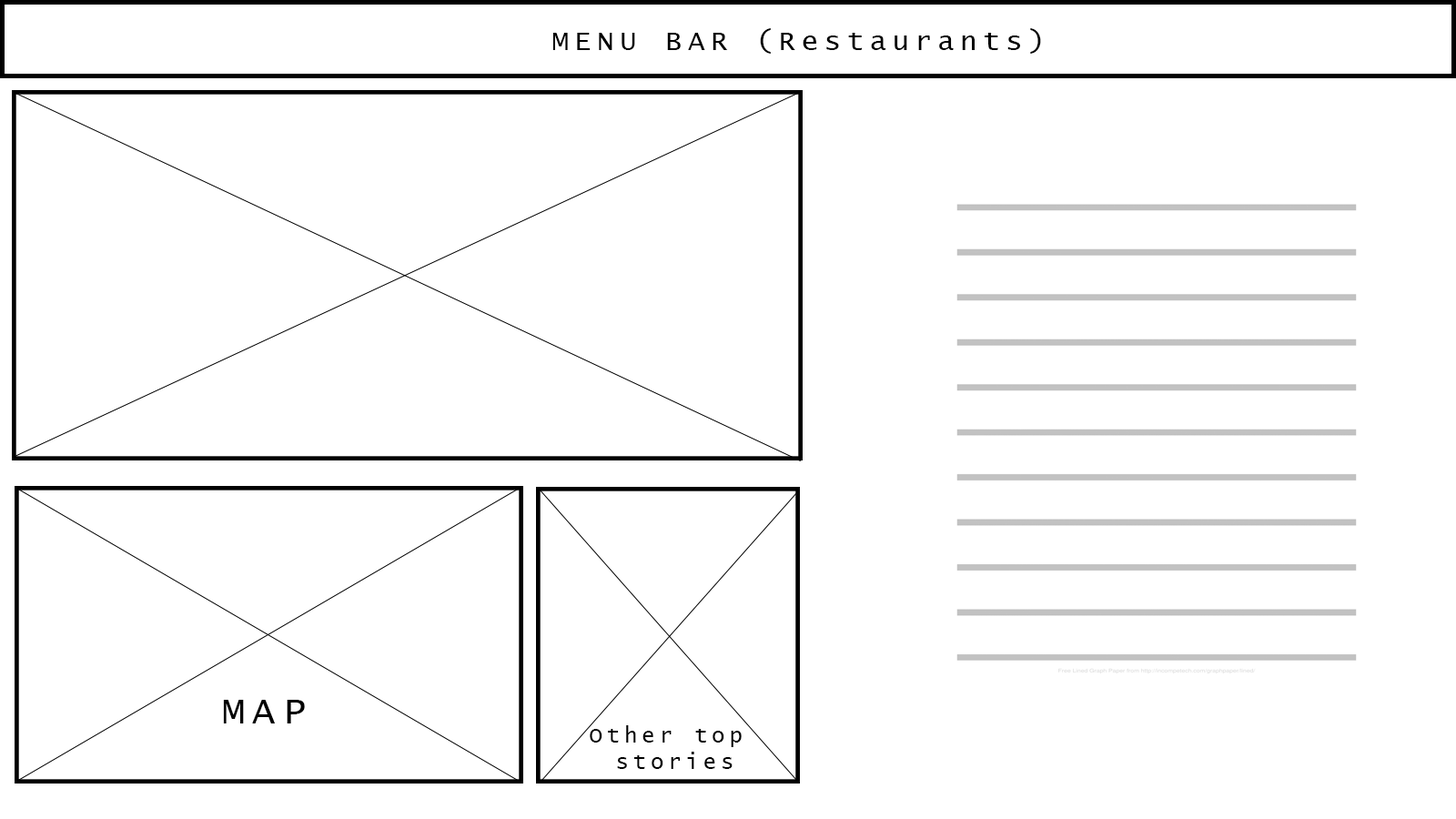
<style>
.page{position:relative;width:1456px;height:819px;background:#ffffff}
.page>*{position:absolute;margin:0}
.t1{font:28.3px "LucidaConsole";letter-spacing:0.2em;color:#000000}
.t2{font:37.9px "LucidaConsole";letter-spacing:0.2em;color:#000000}
.t3{font:21.8px "LucidaConsole";letter-spacing:0.2em;color:#000000}
</style>
<div class="page">
<p class="t1" style="left:552px;top:28px;width:489px;height:26px">MENU BAR (Restaurants)</p>
<p class="t2" style="left:223px;top:700px;width:82px;height:23px">MAP</p>
<p class="t3" style="left:590px;top:725px;width:152px;height:44px;text-align:center">Other top <br>stories</p>
</div>
